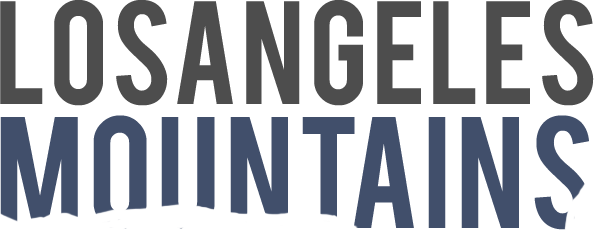
<style>
.page{position:relative;width:594px;height:230px;background:#ffffff}
.page>*{position:absolute;margin:0}
.t1{font:115.5px/124.6px "Bebas";letter-spacing:0.01em;color:#4d4d4d;text-transform:uppercase}
.t2{font:124.8px/124.6px "Bebas";letter-spacing:0.01em;color:#414f6b;text-transform:uppercase}
</style>
<div class="page">
<p class="t1" style="left:0px;top:0px;width:594px;height:230px">LOSANGELES<br><span class="t2">MOUNTAINS</span></p>
</div>
